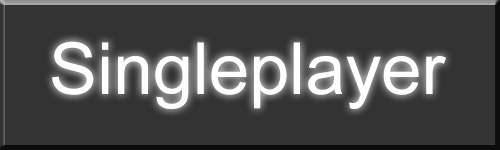
<style>
.page{position:relative;width:500px;height:150px;background:#333333}
.page>*{position:absolute;margin:0}
.t1{font:72px "ArialMT";color:#ffffff}
</style>
<div class="page">
<p class="t1" style="left:52px;top:41px;width:394px;height:68px">Singleplayer</p>
</div>
